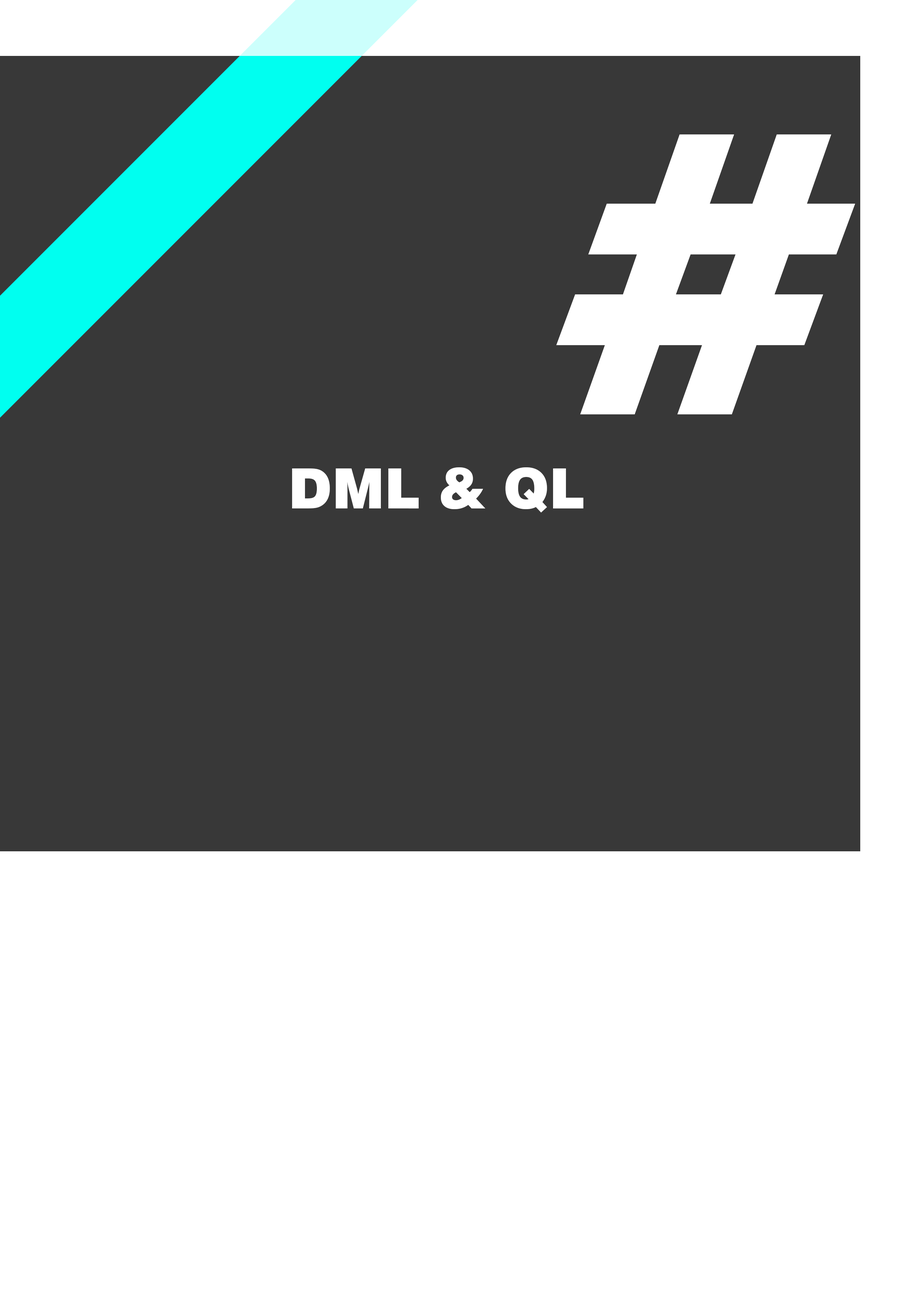
<style>
.page{position:relative;width:918px;height:1299px;background:#383838}
.page>*{position:absolute;margin:0}
.t1{font:385.6px "Swiss721BT-Black";color:#ffffff}
.t2{font:55.5px "Swiss721BT-Black";color:#ffffff}
</style>
<div class="page">
<p class="t1" style="left:556px;top:134px;width:300px;height:280px">#</p>
<p class="t2" style="left:292px;top:467px;width:291px;height:45px">DML &amp; QL</p>
</div>
